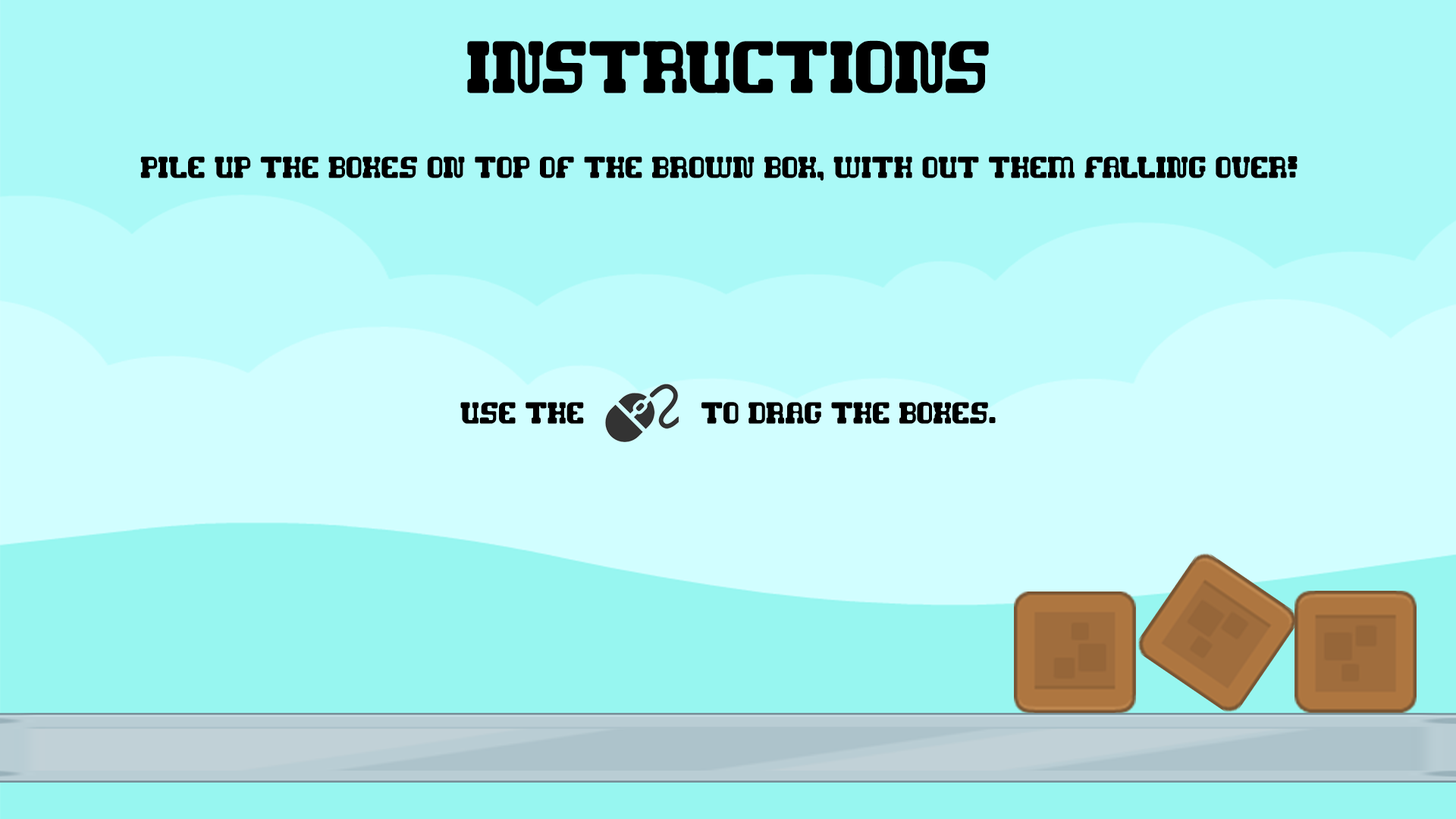
<style>
.page{position:relative;width:1456px;height:819px;background:#aaf9f7}
.page>*{position:absolute;margin:0}
.t1{font:79px "gamerobot";color:#000000}
.t2{font:32.3px "gamerobot";color:#000000}
</style>
<div class="page">
<p class="t1" style="left:467px;top:40px;width:522px;height:53px">Instructions</p>
<p class="t2" style="left:140px;top:156px;width:1157px;height:24px">Pile up the boxes on top of the brown box, with out them falling over!</p>
</div>
